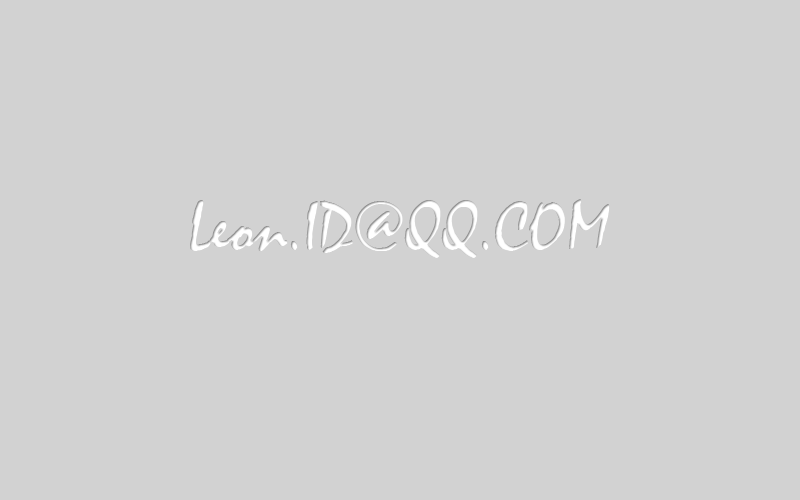
<style>
.page{position:relative;width:800px;height:500px;background:#d2d2d2}
.page>*{position:absolute;margin:0}
.t1{font:72px "Mistral"}
</style>
<div class="page">
<p class="t1" style="left:190px;top:199px;width:420px;height:59px">Leon.ID@QQ.COM</p>
</div>
